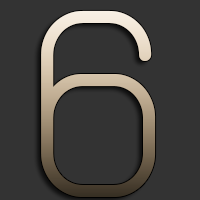
<style>
.page{position:relative;width:200px;height:200px;background:#333333}
.page>*{position:absolute;margin:0}
.t1{font:245.6px "GreyscaleBasic-Regular";scale:0.94 1}
</style>
<div class="page">
<p class="t1" style="left:41px;top:10px;width:115px;height:187px">6</p>
</div>
